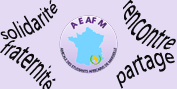
<style>
.page{position:relative;width:177px;height:89px;background:#e4daf4}
.page>*{position:absolute;margin:0}
.t1{font:15.6px "MyriadPro-Regular";color:#0b0b0b;scale:1.04 1}
.t2{font:24px "MyriadPro-Regular";color:#0b0b0b;scale:0.65 1}
.t3{font:18.9px "MyriadPro-Regular";color:#0b0b0b}
</style>
<div class="page">
<p class="t1" style="left:0px;top:0px;width:58px;height:40px;rotate:-29deg">solidarité</p>
<p class="t2" style="left:123px;top:0px;width:53px;height:50px;rotate:42deg">rencontre</p>
<p class="t3" style="left:116px;top:52px;width:59px;height:37px;rotate:-22deg">partage</p>
</div>
